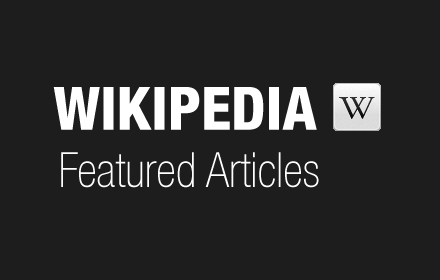
<style>
.page{position:relative;width:440px;height:280px;background:#1d1d1d}
.page>*{position:absolute;margin:0}
.t1{font:60px "HelveticaNeueLT-HeavyCond";color:#ffffff}
.t2{font:48px "HelveticaNeueLT-ThinCond";color:#ffffff}
</style>
<div class="page">
<p class="t1" style="left:53px;top:87px;width:264px;height:43px">WIKIPEDIA</p>
<p class="t2" style="left:61px;top:152px;width:258px;height:36px">Featured Articles</p>
</div>
